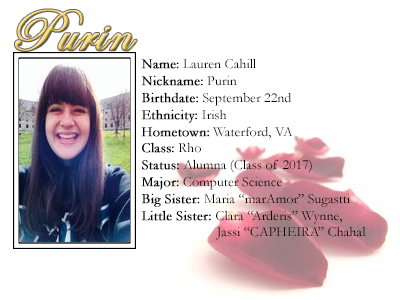
<style>
.page{position:relative;width:400px;height:300px;background:#ffffff}
.page>*{position:absolute;margin:0}
.t1{font:60px "EdwardianScriptITC";font-weight:bold}
.t2{font:14px "Garamond";color:#000000}
.t3{font:14px "Garamond";color:#000000;font-weight:bold}
</style>
<div class="page">
<p class="t1" style="left:15px;top:9px;width:122px;height:42px">Purin</p>
<p class="t2" style="left:141px;top:58px;width:225px;height:182px"><span class="t3">Name:</span> Lauren Cahill<br><span class="t3">Nickname:</span> Purin<br><span class="t3">Birthdate:</span> September 22nd<br><span class="t3">Ethnicity:</span> Irish<br><span class="t3">Hometown:</span> Waterford, VA<br><span class="t3">Class:</span> Rho<br><span class="t3">Status:</span> Alumna (Class of 2017)<br><span class="t3">Major:</span> Computer Science<br><span class="t3">Big Sister: </span>Maria “marAmor” Sugastti <br><span class="t3">Little Sister: </span>Clara “Arderis” Wynne, <br>   Jassi “CAPHEIRA” Chahal</p>
</div>
